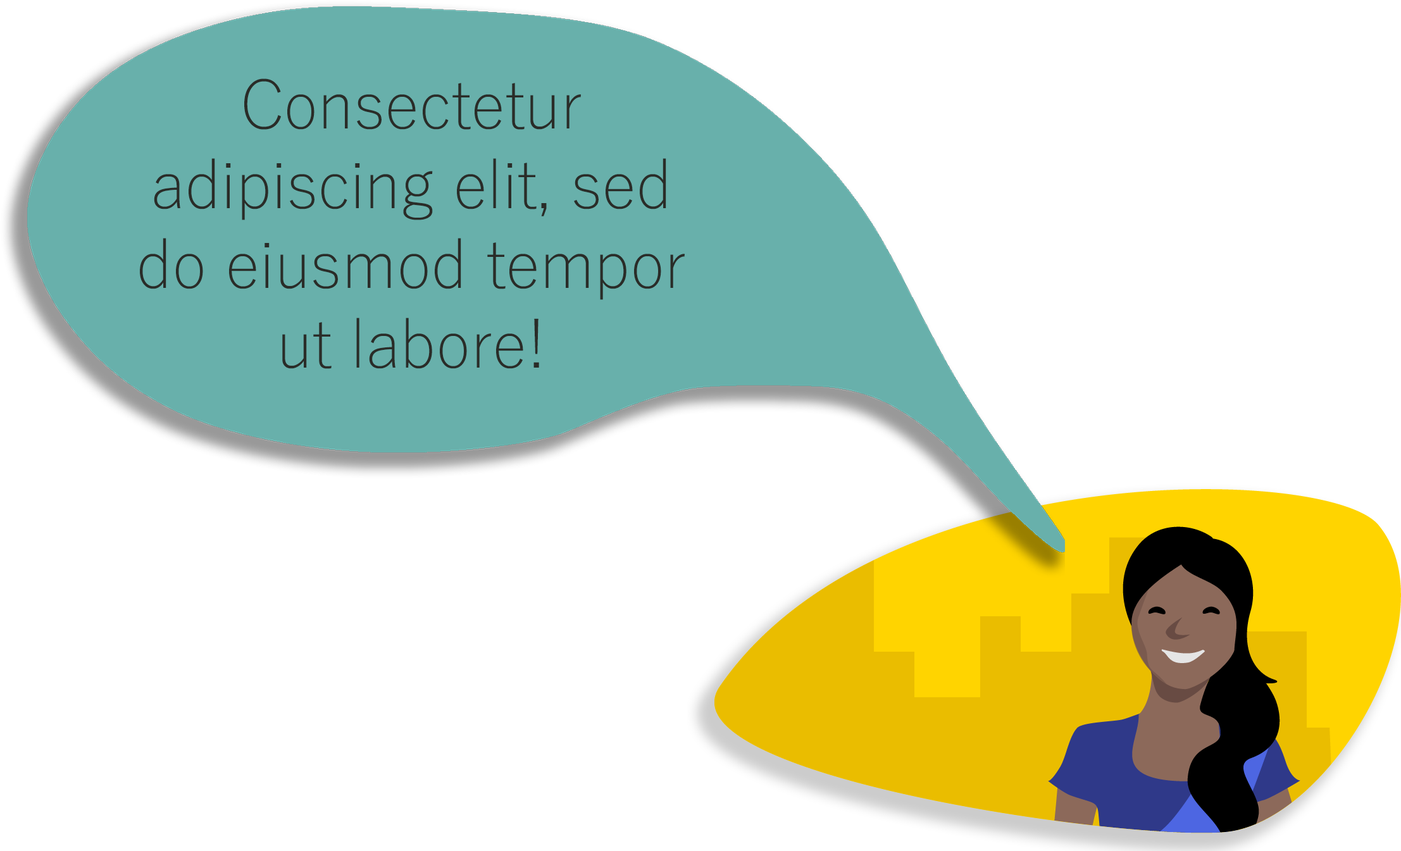
<style>
.page{position:relative;width:1401px;height:851px;background:#ffffff}
.page>*{position:absolute;margin:0}
.t1{font:66.4px "YuGothic-Light";color:#2a2c28}
</style>
<div class="page">
<p class="t1" style="left:140px;top:78px;width:545px;height:291px;text-align:center">Consectetur adipiscing elit, sed do eiusmod tempor ut labore!</p>
</div>
